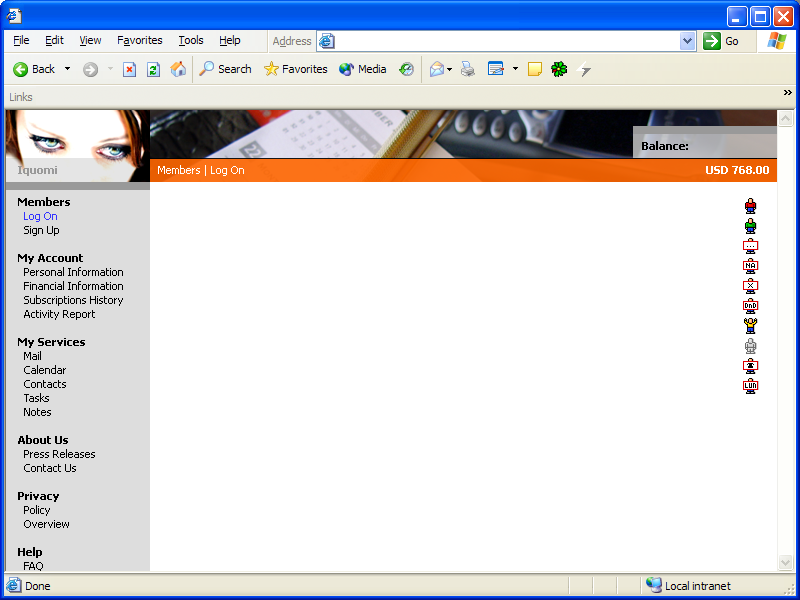
<style>
.page{position:relative;width:800px;height:600px;background:#ffffff}
.page>*{position:absolute;margin:0}
.t1{font:11px "Tahoma-Bold";color:#000000}
.t2{font:11px "Tahoma-Bold";color:#999999}
.t3{font:11px "Tahoma";color:#ffffff}
.t4{font:11px "Tahoma-Bold";color:#ffffff}
.t5{font:11px/14px "Tahoma";color:#000000}
.t6{font:11px/14px "Tahoma-Bold";color:#000000}
.t7{font:11px/14px "Tahoma";color:#3333ff}
</style>
<div class="page">
<p class="t1" style="left:642px;top:141px;width:46px;height:9px">Balance:</p>
<p class="t2" style="left:18px;top:166px;width:39px;height:10px">Iquomi</p>
<p class="t3" style="left:158px;top:165px;width:86px;height:11px"><span class="t4"><br></span>Members | Log On</p>
<p class="t4" style="left:706px;top:166px;width:63px;height:8px">USD 768.00</p>
<p class="t5" style="left:18px;top:197px;width:105px;height:389px"><span class="t6">Members<br></span><span class="t7">  Log On<br></span>  Sign Up<br><br><span class="t6">My Account<br></span>  Personal Information<br>  Financial Information<br>  Subscriptions History<br>  Activity Report<br><br><span class="t6">My Services<br></span>  Mail<br>  Calendar<br>  Contacts<br>  Tasks<br>  Notes<br><br><span class="t6">About Us<br></span>  Press Releases<br>  Contact Us<br><br><span class="t6">Privacy<br></span>  Policy<br>  Overview<br><br><span class="t6">Help<br></span>  FAQ<br>  Getting Started</p>
</div>
